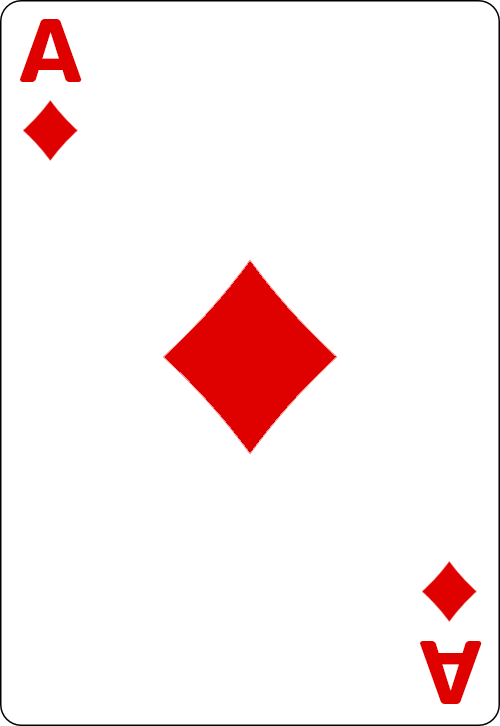
<style>
.page{position:relative;width:500px;height:726px;background:#ffffff}
.page>*{position:absolute;margin:0}
.t1{font:89.6px "MADETommySoft-Bold";color:#df0000}
</style>
<div class="page">
<p class="t1" style="left:20px;top:19px;width:62px;height:63px">A</p>
<p class="t1" style="left:420px;top:641px;width:62px;height:63px;rotate:180deg">A</p>
</div>
